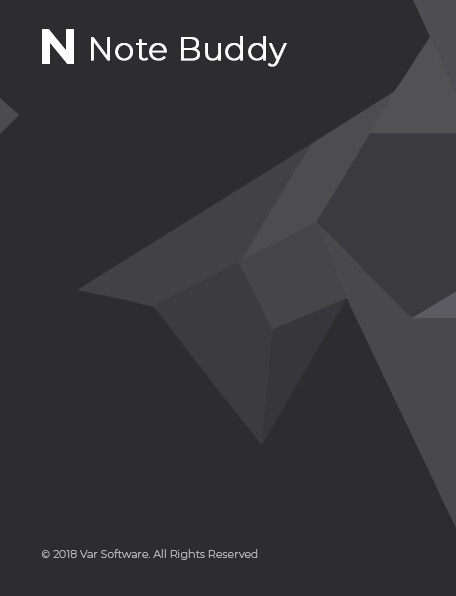
<style>
.page{position:relative;width:456px;height:596px;background:#2d2d30}
.page>*{position:absolute;margin:0}
.t1{font:50px "Montserrat-Bold";color:#ffffff}
.t2{font:32px "Montserrat-Light";color:#ffffff;font-weight:bold}
.t3{font:11px "Montserrat-Light";color:#b4b4b5}
</style>
<div class="page">
<p class="t1" style="left:42px;top:29px;width:32px;height:35px">N</p>
<p class="t2" style="left:91px;top:36px;width:196px;height:31px">Note Buddy</p>
<p class="t3" style="left:41px;top:549px;width:217px;height:11px">© 2018 Var Software. All Rights Reserved</p>
</div>
